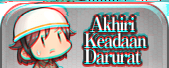
<style>
.page{position:relative;width:169px;height:68px}
.page>*{position:absolute;margin:0}
.t1{font:20px/16px "RyuminPro-ExBold";letter-spacing:-0.1em;scale:0.9 1}
</style>
<div class="page">
<p class="t1" style="left:84px;top:15px;width:63px;height:48px">Akhiri<br>Keadaan<br>Darurat</p>
</div>
